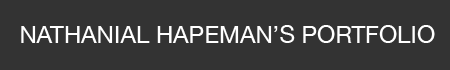
<style>
.page{position:relative;width:450px;height:70px;background:#333333}
.page>*{position:absolute;margin:0}
.t1{font:24px "HelveticaNeue";color:#ffffff}
</style>
<div class="page">
<p class="t1" style="left:21px;top:25px;width:414px;height:18px">NATHANIAL HAPEMAN’S PORTFOLIO</p>
</div>
